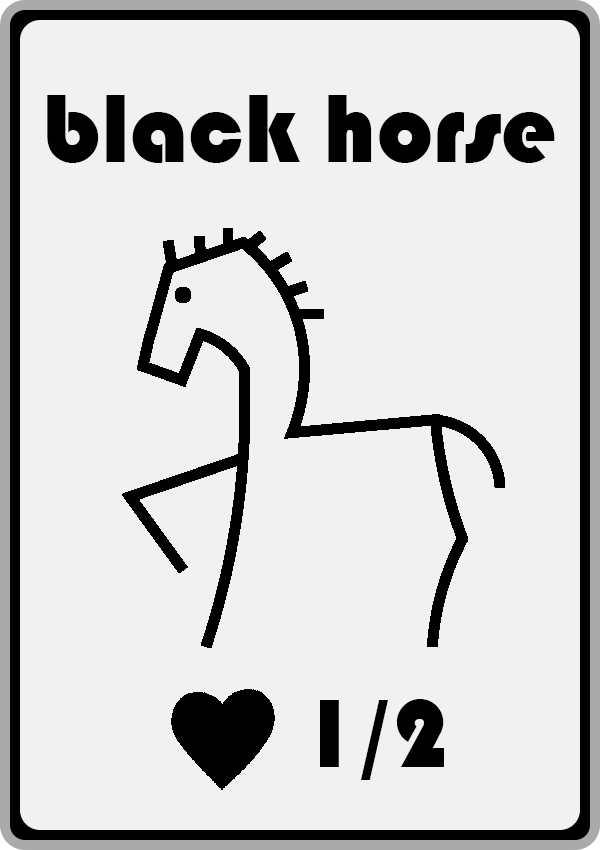
<style>
.page{position:relative;width:600px;height:850px;background:#f1f1f1}
.page>*{position:absolute;margin:0}
.t1{font:100px "Bauhaus93";color:#000000}
</style>
<div class="page">
<p class="t1" style="left:47px;top:95px;width:508px;height:68px">black horse</p>
<p class="t1" style="left:320px;top:699px;width:124px;height:81px">1/2</p>
</div>
